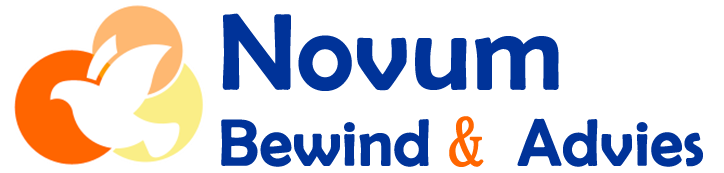
<style>
.page{position:relative;width:724px;height:173px;background:#ffffff}
.page>*{position:absolute;margin:0}
.t1{font:64.8px/76.6px "BerlinSansFB-Reg";color:#003399;font-weight:bold}
.t2{font:106px/76.6px "BerlinSansFB-Reg";color:#003399;font-weight:bold}
.t3{font:64.8px/76.6px "BatangChe";color:#ff6600;font-weight:bold}
</style>
<div class="page">
<p class="t1" style="left:221px;top:13px;width:482px;height:154px"><span class="t2">Novum<br></span>Bewind <span class="t3">&amp; </span>Advies</p>
</div>
